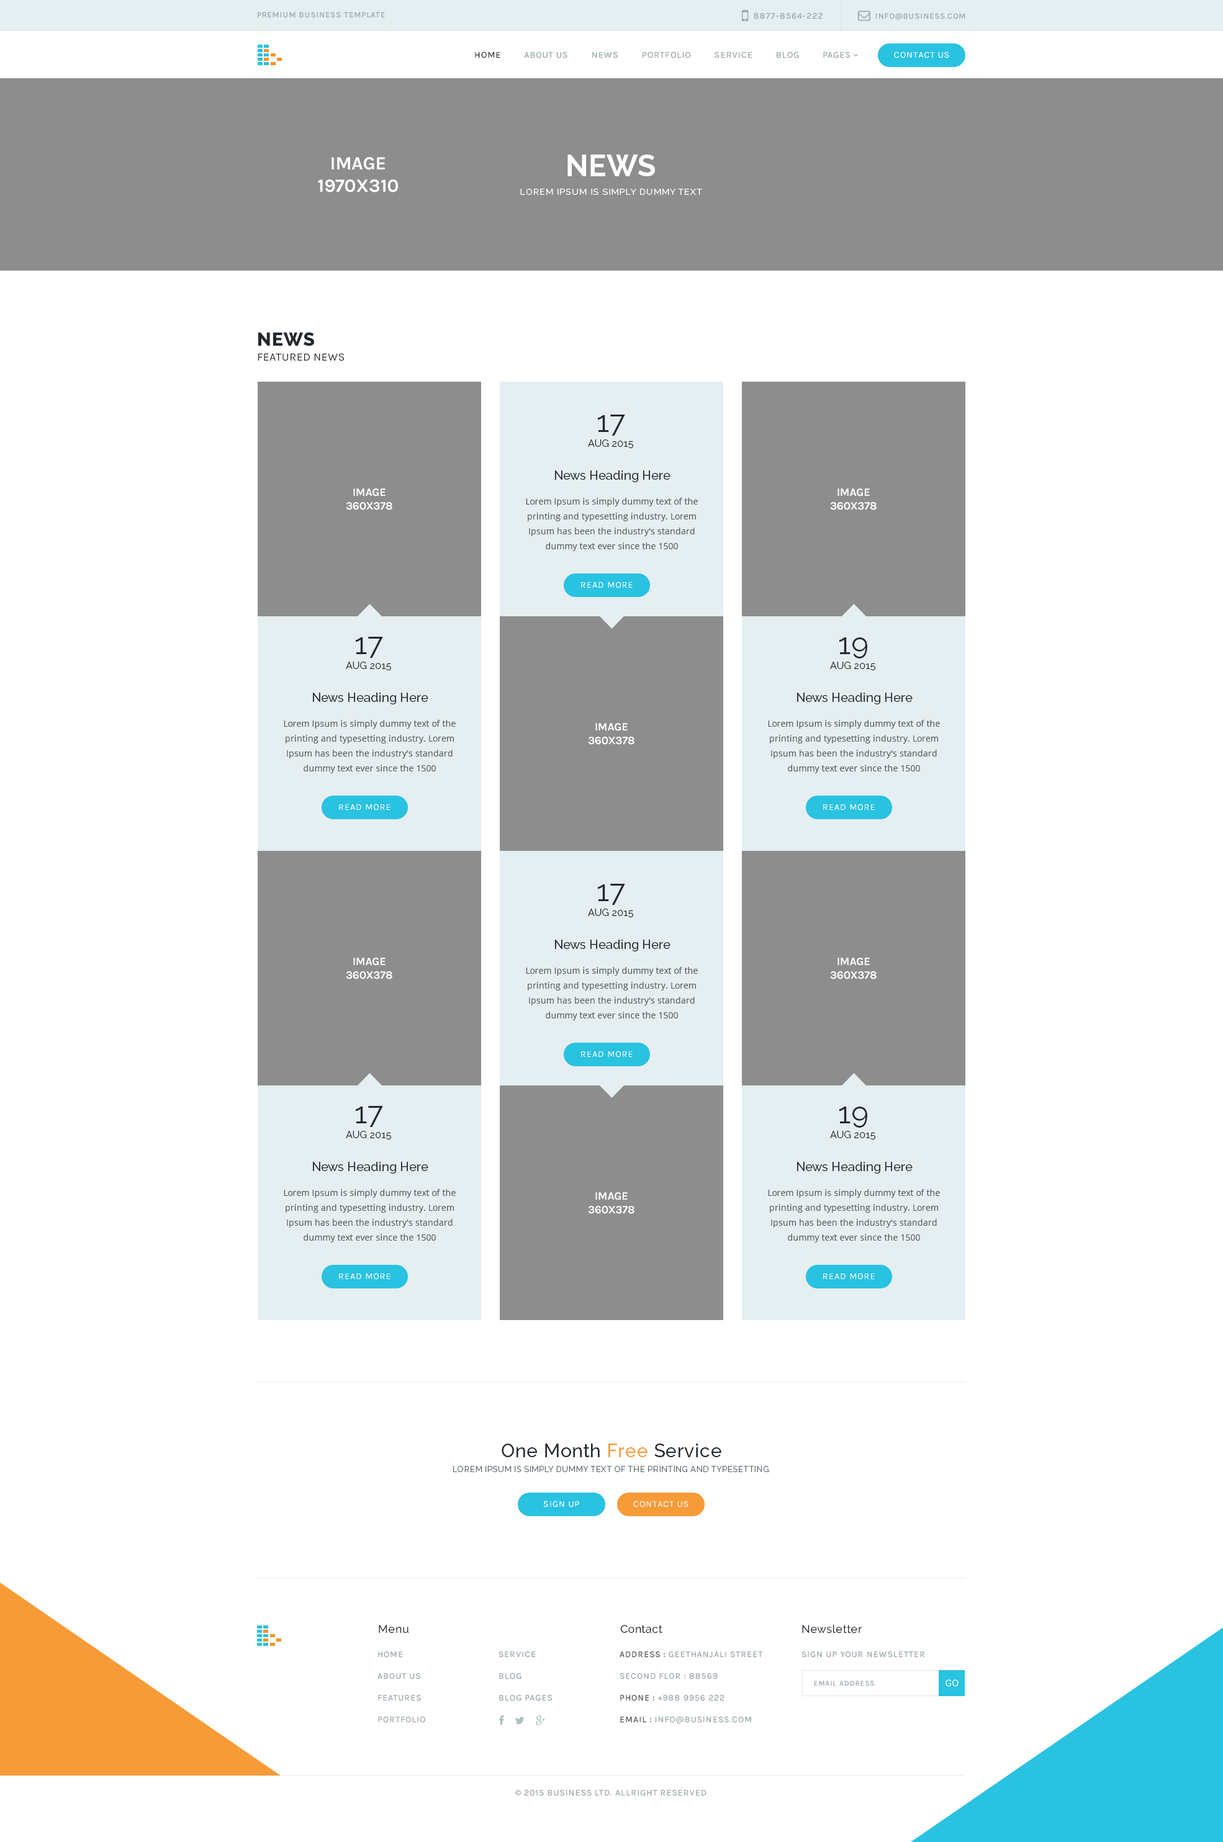
<style>
.page{position:relative;width:1223px;height:1842px;background:#ffffff}
.page>*{position:absolute;margin:0}
.t1{font:8.1px "Karla-Regular";letter-spacing:0.075em;color:#93a1a7;text-transform:uppercase}
.t2{font:8.7px "Karla-Regular";letter-spacing:0.075em;color:#93a1a7;text-transform:uppercase}
.t3{font:9px "Karla-Regular";letter-spacing:0.075em;color:#93a1a7;text-transform:uppercase}
.t4{font:9px "Karla-Regular";letter-spacing:0.075em;color:#23282f;text-transform:uppercase}
.t5{font:9px "Karla-Regular";letter-spacing:0.075em;color:#ffffff;text-transform:uppercase}
.t6{font:18.6px "Karla-Bold";letter-spacing:-0.01em;color:#ffffff;text-transform:uppercase}
.t7{font:8.7px/18.6px "Raleway-Regular";letter-spacing:0.075em;color:#ffffff;text-transform:uppercase}
.t8{font:29.8px/18.6px "Raleway-Bold";color:#ffffff;text-transform:uppercase}
.t9{font:11.2px/14.9px "Karla-Regular";letter-spacing:0.025em;color:#23282f;text-transform:uppercase}
.t10{font:18.6px/14.9px "Raleway-ExtraBold";letter-spacing:0.025em;color:#23282f;text-transform:uppercase}
.t11{font:9.9px/14.9px "Raleway-Regular";color:#23282f;text-transform:uppercase}
.t12{font:29.8px/14.9px "Raleway-Regular";color:#23282f}
.t13{font:12.4px "Raleway-Medium";color:#23282f}
.t14{font:11.2px "Karla-Bold";letter-spacing:-0.01em;color:#ffffff;text-transform:uppercase}
.t15{font:8.7px/14.9px "OpenSans";color:#55595f}
.t16{font:8.1px/14.9px "Raleway-Regular";letter-spacing:0.05em;color:#59686c;text-transform:uppercase}
.t17{font:18.6px/14.9px "Raleway-Medium";letter-spacing:0.025em;color:#23282f}
.t18{font:18.6px/14.9px "Raleway-Medium";letter-spacing:0.025em;color:#f69b37}
.t19{font:11.2px "Raleway-Medium";letter-spacing:0.025em;color:#23282f}
.t20{font:8.7px/21.7px "Karla-Regular";letter-spacing:0.075em;color:#93a1a7;text-transform:uppercase}
.t21{font:8.7px/21.7px "Karla-Regular";letter-spacing:0.075em;color:#3e4146;text-transform:uppercase}
.t22{font:7.4px "Karla-Regular";letter-spacing:0.075em;color:#93a1a7;text-transform:uppercase}
.t23{font:9.3px "RobotoSlab-Regular";letter-spacing:0.025em;color:#ffffff}
.t24{font:8.7px "MyriadPro-Regular";letter-spacing:0.075em;color:#93a1a7;text-transform:uppercase}
</style>
<div class="page">
<p class="t1" style="left:257px;top:12px;width:128px;height:6px">premium business template</p>
<p class="t2" style="left:754px;top:12px;width:68px;height:7px">8877-8564-222</p>
<p class="t1" style="left:875px;top:13px;width:90px;height:7px">info@business.com</p>
<p class="t3" style="left:475px;top:52px;width:375px;height:6px"><span class="t4">Home         </span>About Us         News         Portfolio         Service         Blog         Pages</p>
<p class="t5" style="left:894px;top:52px;width:55px;height:6px">Contact Us</p>
<p class="t6" style="left:318px;top:157px;width:80px;height:35px;text-align:center">Image<br>1970x310</p>
<p class="t7" style="left:520px;top:155px;width:182px;height:40px;text-align:center"><span class="t8">News<br></span>Lorem Ipsum is simply dummy text</p>
<p class="t9" style="left:258px;top:332px;width:86px;height:29px"><span class="t10">News<br></span>Featured News</p>
<p class="t11" style="left:588px;top:415px;width:45px;height:34px;text-align:center"><span class="t12">17<br></span>aug 2015</p>
<p class="t13" style="left:555px;top:470px;width:115px;height:12px">News Heading Here</p>
<p class="t14" style="left:346px;top:488px;width:46px;height:22px;text-align:center">Image<br>360X378</p>
<p class="t15" style="left:526px;top:498px;width:172px;height:53px;text-align:center">Lorem Ipsum is simply dummy text of the printing and typesetting industry. Lorem Ipsum has been the industry's standard dummy text ever since the 1500</p>
<p class="t14" style="left:830px;top:488px;width:46px;height:22px;text-align:center">Image<br>360X378</p>
<p class="t5" style="left:581px;top:582px;width:51px;height:6px">read more</p>
<p class="t11" style="left:346px;top:637px;width:45px;height:34px;text-align:center"><span class="t12">17<br></span>aug 2015</p>
<p class="t11" style="left:830px;top:637px;width:45px;height:34px;text-align:center"><span class="t12">19<br></span>aug 2015</p>
<p class="t13" style="left:313px;top:693px;width:115px;height:11px">News Heading Here</p>
<p class="t13" style="left:797px;top:693px;width:115px;height:11px">News Heading Here</p>
<p class="t15" style="left:284px;top:720px;width:172px;height:53px;text-align:center">Lorem Ipsum is simply dummy text of the printing and typesetting industry. Lorem Ipsum has been the industry's standard dummy text ever since the 1500</p>
<p class="t14" style="left:588px;top:723px;width:46px;height:22px;text-align:center">Image<br>360X378</p>
<p class="t15" style="left:768px;top:720px;width:172px;height:53px;text-align:center">Lorem Ipsum is simply dummy text of the printing and typesetting industry. Lorem Ipsum has been the industry's standard dummy text ever since the 1500</p>
<p class="t5" style="left:339px;top:804px;width:51px;height:7px">read more</p>
<p class="t5" style="left:823px;top:804px;width:52px;height:7px">read more</p>
<p class="t11" style="left:588px;top:884px;width:45px;height:34px;text-align:center"><span class="t12">17<br></span>aug 2015</p>
<p class="t13" style="left:555px;top:940px;width:115px;height:12px">News Heading Here</p>
<p class="t14" style="left:346px;top:958px;width:46px;height:21px;text-align:center">Image<br>360X378</p>
<p class="t14" style="left:830px;top:958px;width:46px;height:21px;text-align:center">Image<br>360X378</p>
<p class="t15" style="left:526px;top:967px;width:172px;height:53px;text-align:center">Lorem Ipsum is simply dummy text of the printing and typesetting industry. Lorem Ipsum has been the industry's standard dummy text ever since the 1500</p>
<p class="t5" style="left:581px;top:1051px;width:51px;height:7px">read more</p>
<p class="t11" style="left:346px;top:1106px;width:45px;height:34px;text-align:center"><span class="t12">17<br></span>aug 2015</p>
<p class="t11" style="left:830px;top:1107px;width:45px;height:33px;text-align:center"><span class="t12">19<br></span>aug 2015</p>
<p class="t13" style="left:313px;top:1162px;width:115px;height:12px">News Heading Here</p>
<p class="t13" style="left:797px;top:1162px;width:115px;height:12px">News Heading Here</p>
<p class="t15" style="left:284px;top:1189px;width:172px;height:54px;text-align:center">Lorem Ipsum is simply dummy text of the printing and typesetting industry. Lorem Ipsum has been the industry's standard dummy text ever since the 1500</p>
<p class="t14" style="left:588px;top:1192px;width:46px;height:22px;text-align:center">Image<br>360X378</p>
<p class="t15" style="left:768px;top:1189px;width:172px;height:54px;text-align:center">Lorem Ipsum is simply dummy text of the printing and typesetting industry. Lorem Ipsum has been the industry's standard dummy text ever since the 1500</p>
<p class="t5" style="left:339px;top:1273px;width:51px;height:7px">read more</p>
<p class="t5" style="left:823px;top:1273px;width:52px;height:7px">read more</p>
<p class="t16" style="left:453px;top:1444px;width:317px;height:28px;text-align:center"><span class="t17">One Month </span><span class="t18">Free</span><span class="t17"> Service<br></span>Lorem Ipsum is simply dummy text of the printing and typesetting.</p>
<p class="t5" style="left:543px;top:1501px;width:36px;height:7px">Sign up</p>
<p class="t5" style="left:633px;top:1501px;width:55px;height:7px">Contact us</p>
<p class="t19" style="left:379px;top:1625px;width:29px;height:9px">Menu</p>
<p class="t19" style="left:620px;top:1625px;width:42px;height:9px">Contact</p>
<p class="t19" style="left:802px;top:1624px;width:60px;height:10px">Newsletter</p>
<p class="t20" style="left:377px;top:1651px;width:48px;height:72px">Home<br>About Us<br>Features<br>Portfolio</p>
<p class="t20" style="left:498px;top:1651px;width:54px;height:50px">Service<br>Blog<br>Blog Pages</p>
<p class="t20" style="left:619px;top:1651px;width:144px;height:73px"><span class="t21">Address : </span>Geethanjali street<br>Second flor : 88569<br><span class="t21">Phone :</span> +988 9956 222<br><span class="t21">Email :</span> info@business.com</p>
<p class="t2" style="left:801px;top:1651px;width:123px;height:7px">Sign up your newsletter</p>
<p class="t22" style="left:814px;top:1681px;width:60px;height:5px">Email Address</p>
<p class="t23" style="left:945px;top:1680px;width:13px;height:7px">GO</p>
<p class="t2" style="left:515px;top:1789px;width:191px;height:7px"><span class="t24">©</span> 2015 business Ltd. allright reserved</p>
</div>
